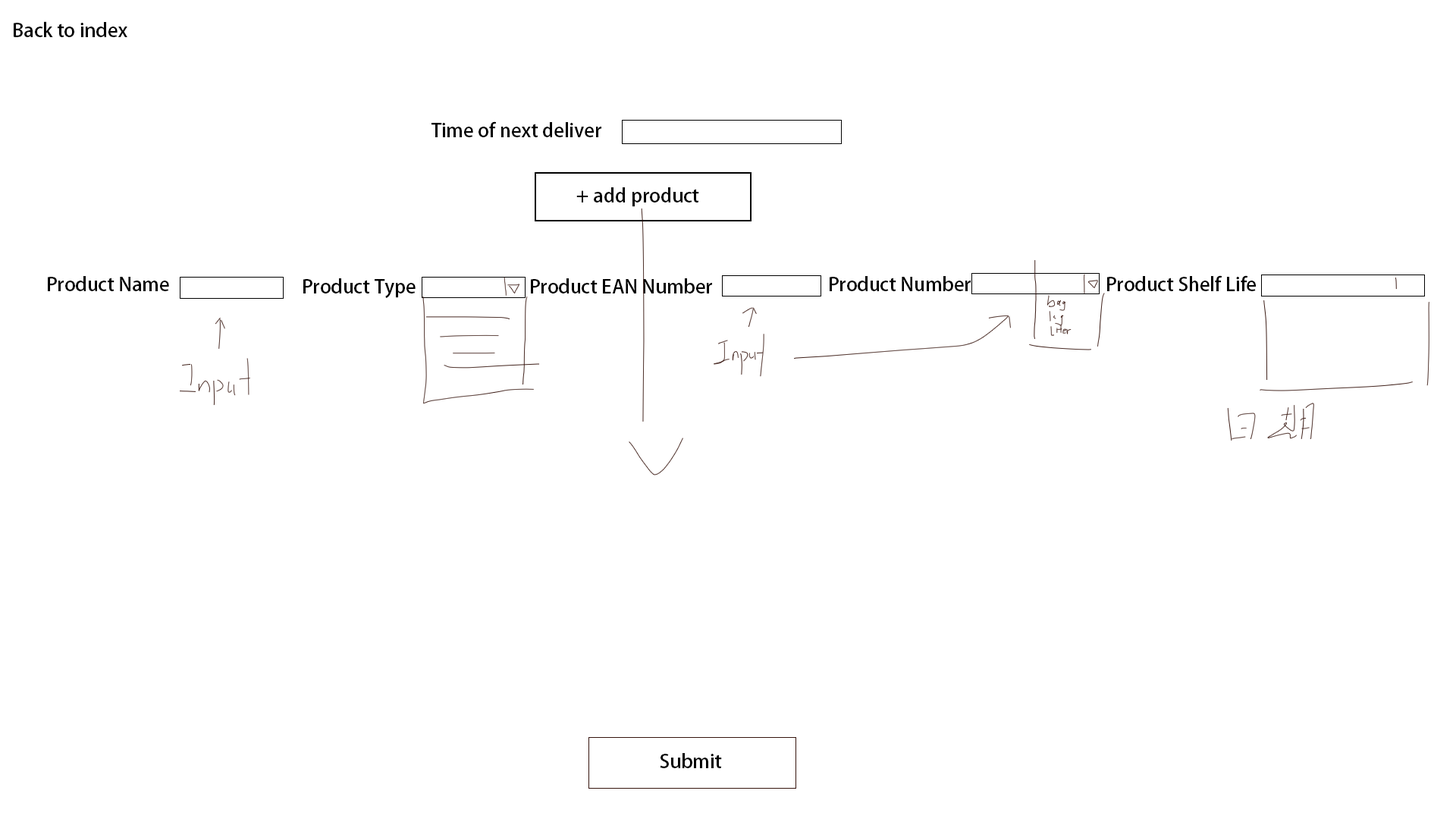
<style>
.page{position:relative;width:1456px;height:819px;background:#ffffff}
.page>*{position:absolute;margin:0}
.t1{font:19px "AdobeHeitiStd-Regular";color:#000000}
</style>
<div class="page">
<p class="t1" style="left:14px;top:21px;width:113px;height:16px">Back to index</p>
<p class="t1" style="left:431px;top:121px;width:170px;height:16px">Time of next deliver</p>
<p class="t1" style="left:576px;top:187px;width:123px;height:20px">+ add product</p>
<p class="t1" style="left:48px;top:276px;width:121px;height:15px">Product Name</p>
<p class="t1" style="left:303px;top:278px;width:113px;height:20px">Product Type</p>
<p class="t1" style="left:531px;top:278px;width:181px;height:15px">Product EAN Number</p>
<p class="t1" style="left:830px;top:276px;width:141px;height:15px">Product Number</p>
<p class="t1" style="left:1107px;top:275px;width:149px;height:16px">Product Shelf Life</p>
<p class="t1" style="left:660px;top:753px;width:62px;height:15px">Submit</p>
</div>
